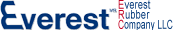
<style>
.page{position:relative;width:173px;height:30px;background:#ffffff}
.page>*{position:absolute;margin:0}
.t1{font:12.1px/10px "ArialMT";color:#003677;scale:0.71 1}
.t2{font:12.1px/10px "ArialMT";color:#c0001f;scale:0.79 1}
.t3{font:12.1px/10px "ArialMT";color:#003677;scale:0.79 1}
.t4{font:12.1px/10px "ArialMT";color:#c0001f;scale:0.71 1}
</style>
<div class="page">
<p class="t1" style="left:118px;top:0px;width:55px;height:32px"><span class="t2">E</span><span class="t3">verest<br></span><span class="t2">R</span><span class="t3">ubber<br></span><span class="t4">C</span>ompany LLC</p>
</div>
